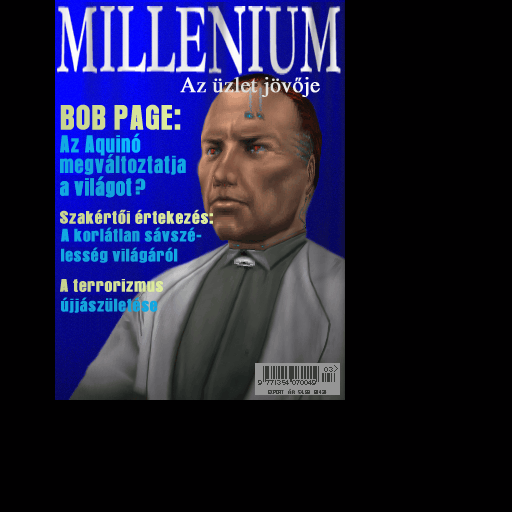
<style>
.page{position:relative;width:512px;height:512px;background:#010001}
.page>*{position:absolute;margin:0}
.t1{font:21.8px "TimesLTStd-Roman";color:#e8e9e8;font-weight:bold}
.t2{font:21.8px "TimesNewRomanPSMT";color:#e8e9e8;font-weight:bold}
.t3{font:30.5px "AuroraCE";color:#deec9d;font-weight:bold;scale:0.94 1}
.t4{font:21.2px "AuroraCE";color:#0ebcfd;font-weight:bold;scale:0.94 1}
.t5{font:21.2px "AuroraCE";color:#14a5dd;font-weight:bold;scale:0.94 1}
.t6{font:21.2px "AuroraCE";color:#14a4dc;font-weight:bold;scale:0.94 1}
.t7{font:15.7px "AuroraCE";color:#deec9d;font-weight:bold;scale:1.08 1}
.t8{font:15.7px "AuroraCE";color:#14a4dc;font-weight:bold;scale:1.08 1}
.t9{font:15.7px "AuroraCE";color:#14a5dd;font-weight:bold;scale:1.08 1}
</style>
<div class="page">
<p class="t1" style="left:180px;top:77px;width:140px;height:20px">Az üzlet jöv<span class="t2">ő</span>je</p>
<p class="t3" style="left:60px;top:104px;width:121px;height:26px">BOB PAGE:</p>
<p class="t4" style="left:60px;top:133px;width:81px;height:23px">Az Aquinó</p>
<p class="t5" style="left:60px;top:154px;width:126px;height:21px">megváltoztatja</p>
<p class="t6" style="left:60px;top:176px;width:72px;height:22px">a világot</p>
<p class="t6" style="left:60px;top:176px;width:72px;height:22px">a világot</p>
<p class="t7" style="left:60px;top:209px;width:153px;height:15px">Szakértői értekezés:</p>
<p class="t8" style="left:61px;top:227px;width:141px;height:15px">A korlátlan sávszé-</p>
<p class="t9" style="left:61px;top:247px;width:117px;height:16px">lesség világáról</p>
<p class="t7" style="left:60px;top:279px;width:103px;height:13px">A terrorizmus</p>
<p class="t9" style="left:61px;top:297px;width:97px;height:16px">újjászületése</p>
</div>
